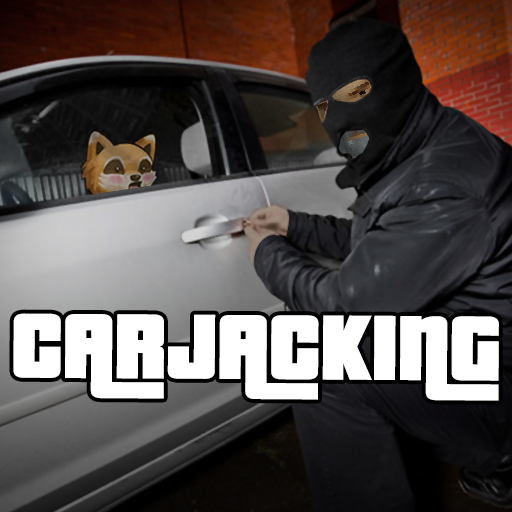
<style>
.page{position:relative;width:512px;height:512px}
.page>*{position:absolute;margin:0}
.t1{font:100px "PricedownBl-Regular";color:#ffffff}
</style>
<div class="page">
<p class="t1" style="left:13px;top:313px;width:486px;height:88px">CARJACKING</p>
</div>
